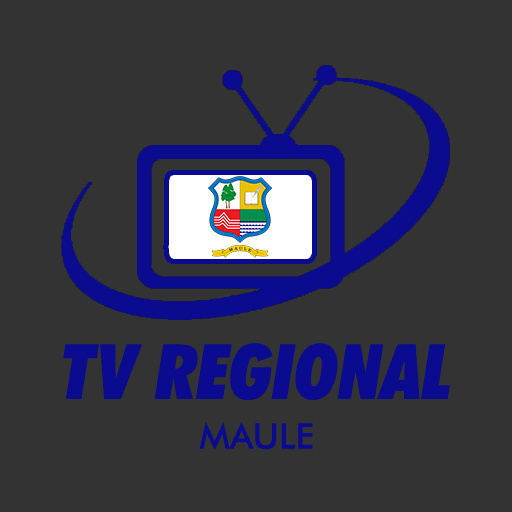
<style>
.page{position:relative;width:512px;height:512px;background:#333333}
.page>*{position:absolute;margin:0}
.t1{font:76.5px "FuturaBT-ExtraBlackCondItalic";color:#0b0b90;text-transform:uppercase}
.t2{font:35.3px "FuturaBT-Medium";color:#0b0b90;text-transform:uppercase}
</style>
<div class="page">
<p class="t1" style="left:63px;top:343px;width:387px;height:57px">TV REGIONAL</p>
<p class="t2" style="left:199px;top:422px;width:114px;height:28px">MAULE</p>
</div>
